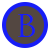
<style>
.page{position:relative;width:50px;height:50px;background:#534741}
.page>*{position:absolute;margin:0}
.t1{font:32.1px "PerpetuaTitlingMT-Light";color:#171df7}
</style>
<div class="page">
<p class="t1" style="left:18px;top:14px;width:17px;height:23px">B</p>
</div>
